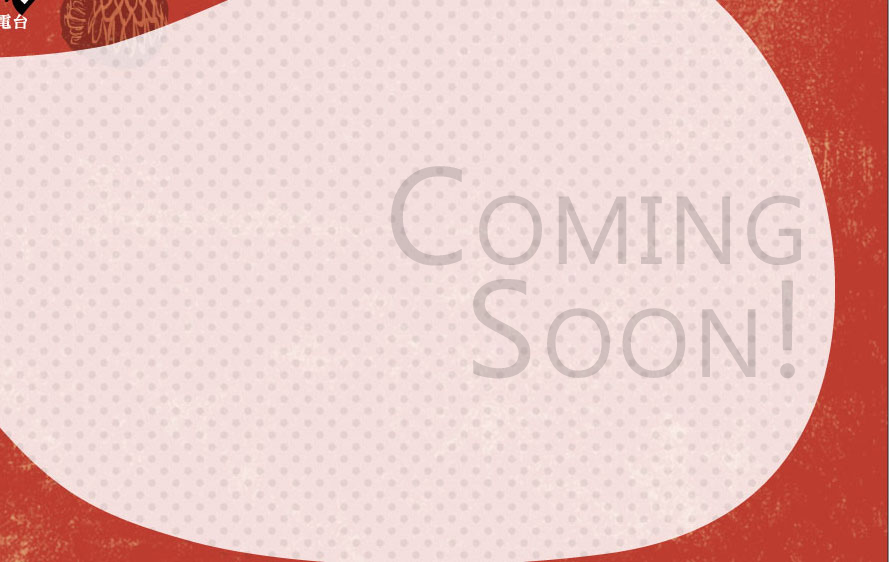
<style>
.page{position:relative;width:889px;height:562px}
.page>*{position:absolute;margin:0}
.t1{font:126.7px/13.9px "MicrosoftJhengHeiRegular";letter-spacing:0.025em;color:#d1bfbd;font-variant:small-caps;font-weight:bold}
</style>
<div class="page">
<p class="t1" style="left:391px;top:166px;width:410px;height:213px;text-align:right">Coming<br>Soon!</p>
</div>
